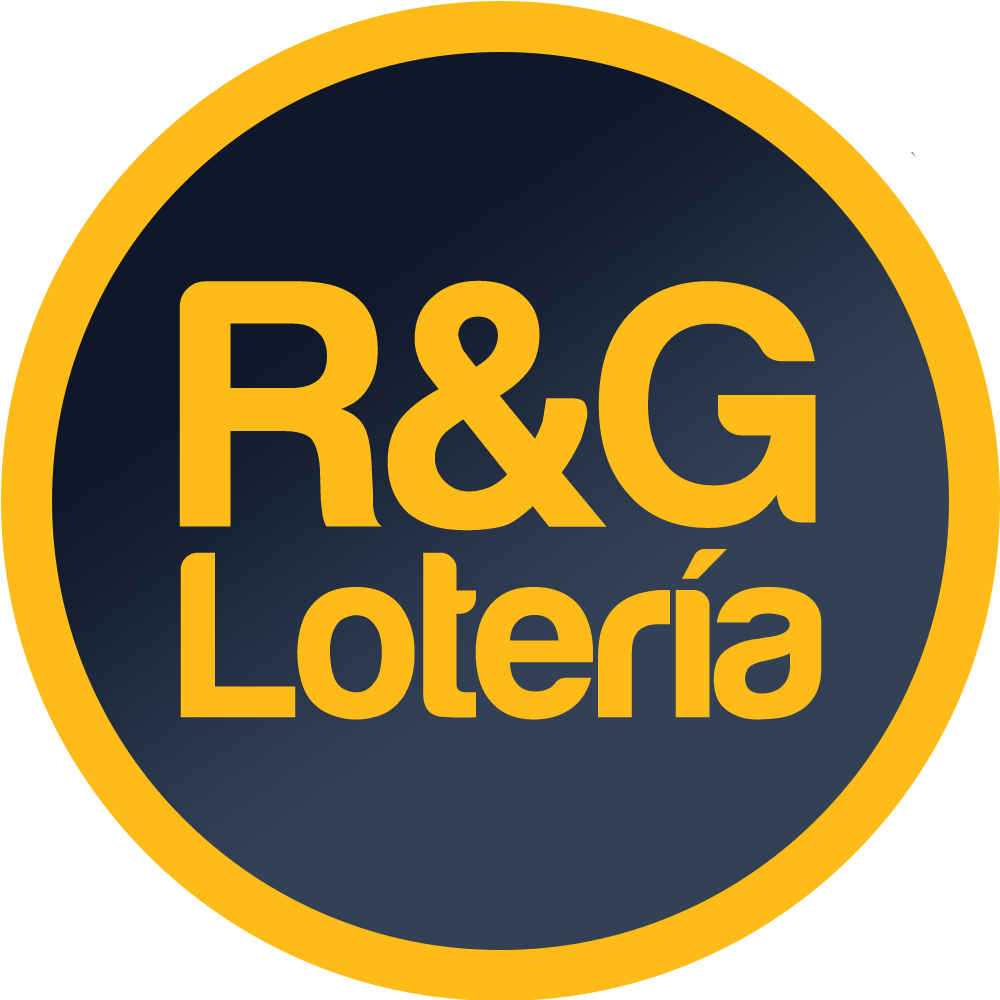
<style>
.page{position:relative;width:1000px;height:1000px;background:#ffbc19}
.page>*{position:absolute;margin:0}
.t1{font:364.6px "Harabara";color:#ffbc19}
.t2{font:348.5px "Harabara";color:#ffbc19}
.t3{font:244.5px "Harabara";color:#ffbc19}
</style>
<div class="page">
<p class="t1" style="left:179px;top:280px;width:428px;height:251px">R&amp;</p>
<p class="t2" style="left:598px;top:281px;width:218px;height:247px">G</p>
<p class="t3" style="left:180px;top:549px;width:642px;height:171px">Lotería</p>
</div>
